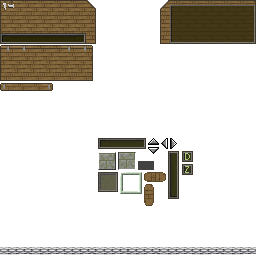
<style>
.page{position:relative;width:256px;height:256px;background:#ffffff}
.page>*{position:absolute;margin:0}
.t1{font:10px "ArialNarrow";letter-spacing:0.44em;color:#b0ce80}
</style>
<div class="page">
<p class="t1" style="left:185px;top:153px;width:5px;height:7px">D</p>
<p class="t1" style="left:185px;top:166px;width:4px;height:7px">Z</p>
</div>
